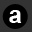
<style>
.page{position:relative;width:32px;height:32px;background:#333333}
.page>*{position:absolute;margin:0}
.t1{font:24px "Arial-BoldMT";color:#ffffff}
</style>
<div class="page">
<p class="t1" style="left:9px;top:10px;width:13px;height:13px">a</p>
</div>
